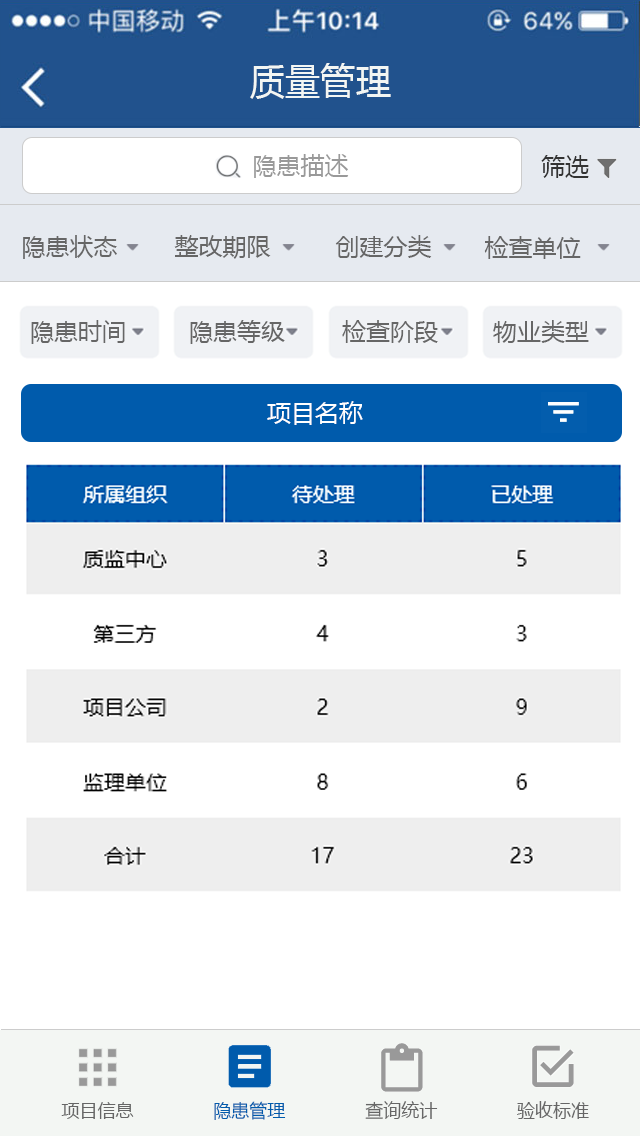
<style>
.page{position:relative;width:640px;height:1136px;background:#ffffff}
.page>*{position:absolute;margin:0}
.t1{font:36px "MicrosoftYaHei";color:#f3f6f3}
.t2{font:24px "MicrosoftYaHei";color:#999999}
.t3{font:24px "MicrosoftYaHei";color:#333333}
.t4{font:24px "MicrosoftYaHei";color:#666666}
.t5{font:24px "MicrosoftYaHei";color:#ffffff}
.t6{font:18px "MicrosoftYaHei";color:#666666}
.t7{font:18px "MicrosoftYaHei";color:#005bac}
</style>
<div class="page">
<p class="t1" style="left:250px;top:63px;width:141px;height:36px">质量管理</p>
<p class="t2" style="left:254px;top:154px;width:95px;height:24px">隐患描述</p>
<p class="t3" style="left:541px;top:155px;width:48px;height:23px">筛选</p>
<p class="t4" style="left:23px;top:235px;width:94px;height:24px">隐患状态</p>
<p class="t4" style="left:174px;top:235px;width:97px;height:24px">整改期限</p>
<p class="t4" style="left:335px;top:235px;width:97px;height:23px">创建分类</p>
<p class="t4" style="left:484px;top:236px;width:97px;height:23px">检查单位</p>
<p class="t4" style="left:31px;top:320px;width:94px;height:24px">隐患时间</p>
<p class="t4" style="left:190px;top:320px;width:95px;height:24px">隐患等级</p>
<p class="t4" style="left:342px;top:320px;width:96px;height:23px">检查阶段</p>
<p class="t4" style="left:493px;top:320px;width:96px;height:23px">物业类型</p>
<p class="t5" style="left:267px;top:401px;width:96px;height:24px">项目名称</p>
<p class="t6" style="left:61px;top:1101px;width:528px;height:19px">项目信息               <span class="t7">隐患管理</span>               查询统计               验收标准</p>
</div>
